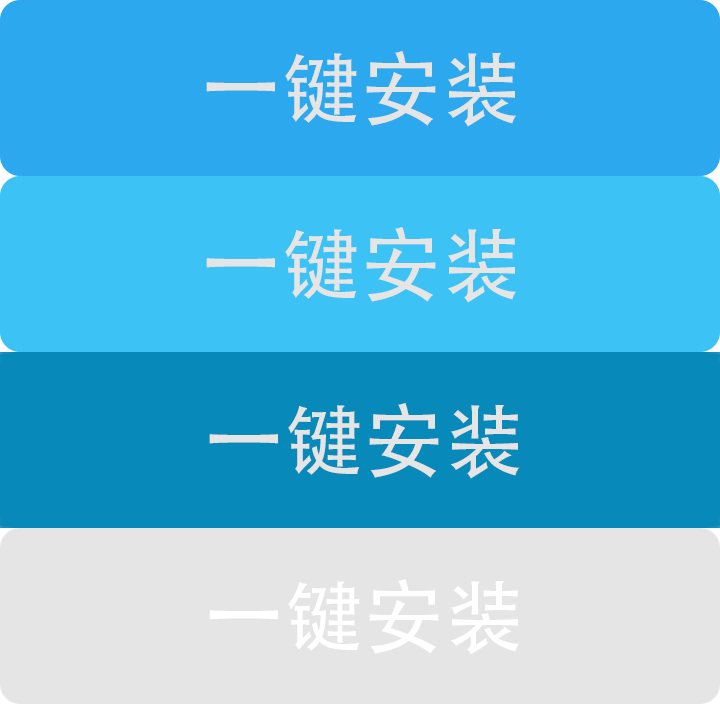
<style>
.page{position:relative;width:720px;height:704px;background:#e5e5e5}
.page>*{position:absolute;margin:0}
.t1{font:80px "AdobeHeitiStd-Regular";color:#e5e5e5}
.t2{font:80px "AdobeHeitiStd-Regular";color:#ffffff}
</style>
<div class="page">
<p class="t1" style="left:206px;top:51px;width:311px;height:76px">一键安装</p>
<p class="t1" style="left:206px;top:227px;width:311px;height:76px">一键安装</p>
<p class="t1" style="left:209px;top:403px;width:311px;height:76px">一键安装</p>
<p class="t2" style="left:209px;top:579px;width:311px;height:76px">一键安装</p>
</div>
